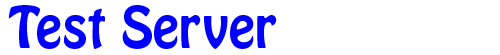
<style>
.page{position:relative;width:500px;height:55px;background:#ffffff}
.page>*{position:absolute;margin:0}
.t1{font:50px "HoboStd";color:#0000ff}
</style>
<div class="page">
<p class="t1" style="left:8px;top:5px;width:269px;height:44px">Test Server</p>
</div>
